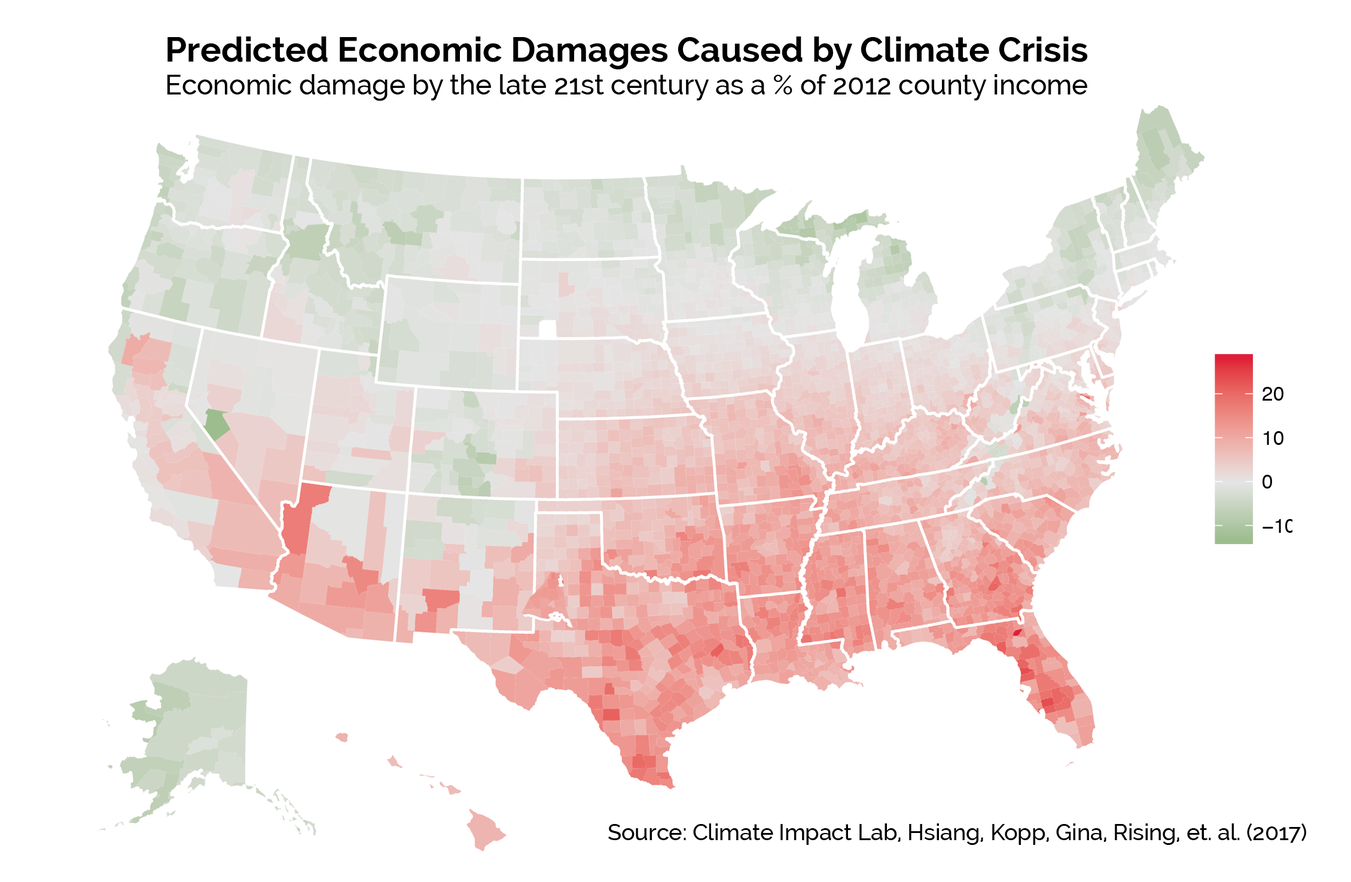
<style>
.page{position:relative;width:1351px;height:882px;background:#ffffff}
.page>*{position:absolute;margin:0}
.t1{font:34.9px "Raleway-Bold";color:#000000}
.t2{font:27.4px "Raleway-Medium";color:#000000}
.t3{font:22.4px "Raleway-Medium";color:#000000}
</style>
<div class="page">
<p class="t1" style="left:168px;top:36px;width:920px;height:34px">Predicted Economic Damages Caused by Climate Crisis</p>
<p class="t2" style="left:167px;top:74px;width:921px;height:27px">Economic damage by the late 21st century as a % of 2012 county income</p>
<p class="t3" style="left:608px;top:824px;width:699px;height:21px">Source: Climate Impact Lab, Hsiang, Kopp, Gina, Rising, et. al. (2017)</p>
</div>
